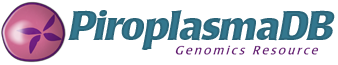
<style>
.page{position:relative;width:338px;height:65px;background:#ffffff}
.page>*{position:absolute;margin:0}
.t1{font:39.5px "PopplLaudatio-Bold";letter-spacing:-0.028em;color:#2e6b80;font-style:italic}
</style>
<div class="page">
<p class="t1" style="left:68px;top:10px;width:267px;height:40px">PiroplasmaDB</p>
</div>
